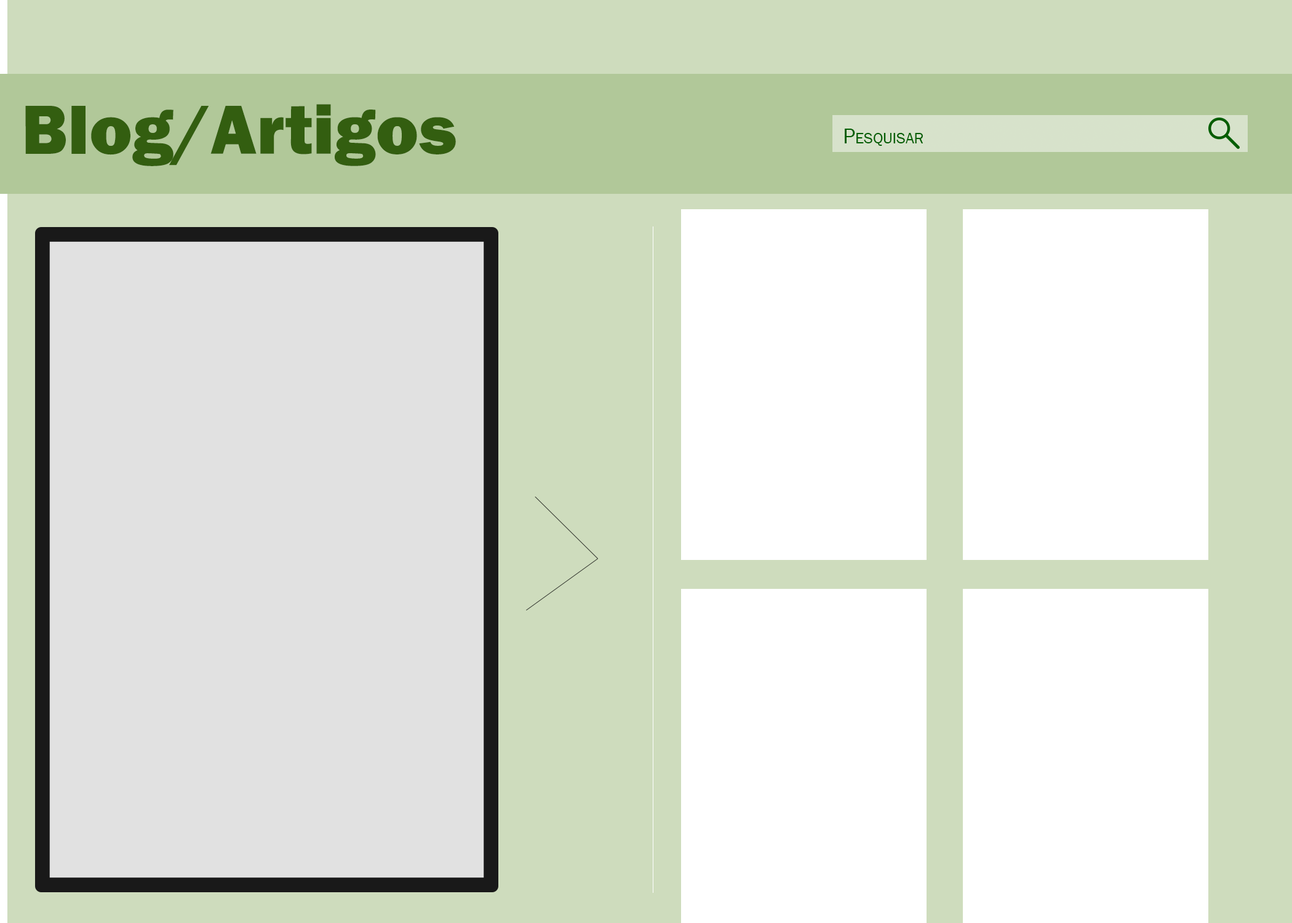
<style>
.page{position:relative;width:1292px;height:923px;background:#cedcbd}
.page>*{position:absolute;margin:0}
.t1{font:123.1px "FranklinGothic-Heavy";letter-spacing:0.005em;color:#335e10}
.t2{font:38.5px "FranklinGothic-Book";letter-spacing:0.005em;color:#005e00;font-variant:small-caps}
</style>
<div class="page">
<p class="t1" style="left:25px;top:104px;width:431px;height:62px">Blog/Artigos</p>
<p class="t2" style="left:845px;top:129px;width:78px;height:17px">Pesquisar</p>
</div>
